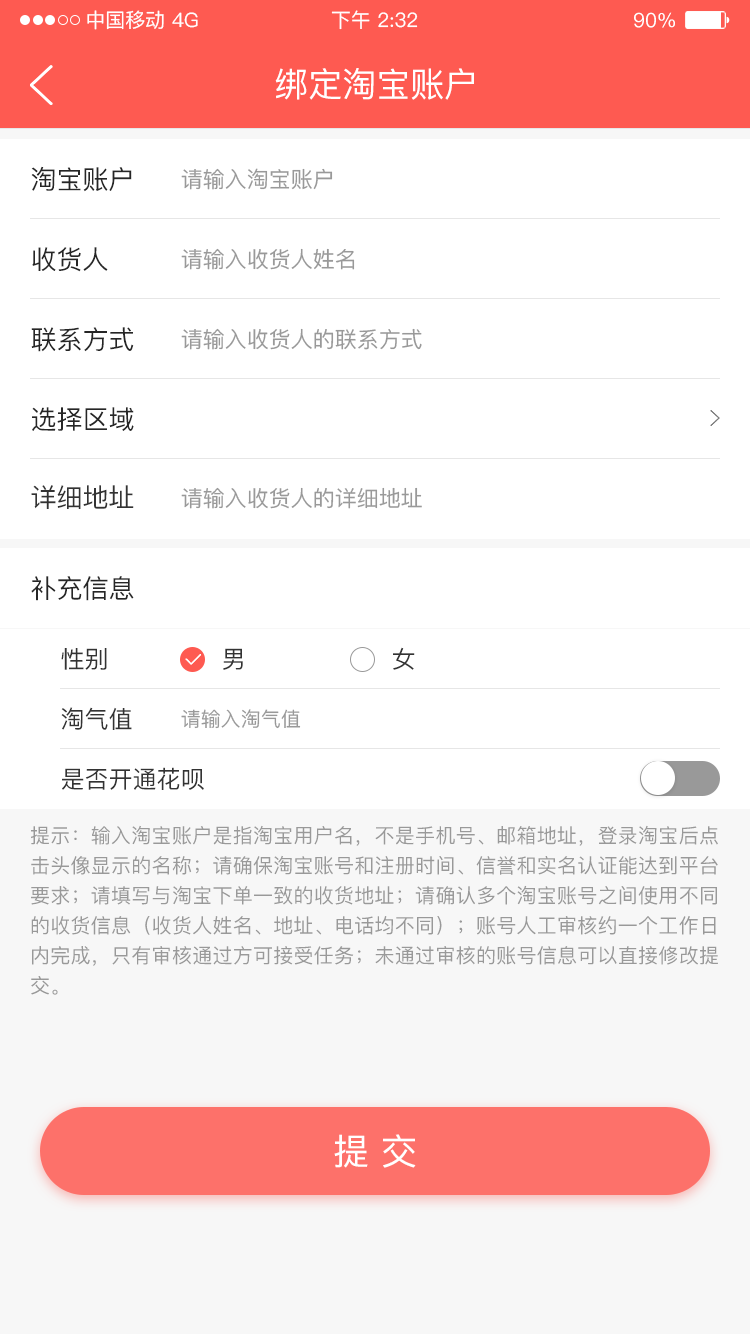
<style>
.page{position:relative;width:750px;height:1334px;background:#ffffff}
.page>*{position:absolute;margin:0}
.t1{font:20px "PingFang-SC-Medium";color:#ffffff}
.t2{font:34px "PingFang-SC-Medium";color:#ffffff}
.t3{font:26px "PingFang-SC-Medium";color:#262626}
.t4{font:22px "PingFang-SC-Medium";color:#999999}
.t5{font:26px "PingFang-SC-Medium";color:#333333}
.t6{font:24px "PingFang-SC-Medium";color:#333333}
.t7{font:20px "PingFang-SC-Medium";color:#999999}
.t8{font:20px/30px "PingFang-SC-Medium";color:#999999}
.t9{font:36px "PingFang-SC-Medium";color:#ffffff}
</style>
<div class="page">
<p class="t1" style="left:87px;top:10px;width:77px;height:20px">中国移动</p>
<p class="t1" style="left:172px;top:12px;width:26px;height:16px">4G</p>
<p class="t1" style="left:331px;top:10px;width:87px;height:20px">下午 2:32</p>
<p class="t1" style="left:634px;top:12px;width:41px;height:16px">90%</p>
<p class="t2" style="left:275px;top:68px;width:199px;height:32px">绑定淘宝账户</p>
<p class="t3" style="left:31px;top:166px;width:101px;height:26px">淘宝账户</p>
<p class="t4" style="left:181px;top:168px;width:152px;height:22px">请输入淘宝账户</p>
<p class="t3" style="left:32px;top:247px;width:76px;height:25px">收货人</p>
<p class="t4" style="left:181px;top:248px;width:174px;height:22px">请输入收货人姓名</p>
<p class="t3" style="left:31px;top:327px;width:103px;height:25px">联系方式</p>
<p class="t4" style="left:181px;top:328px;width:241px;height:22px">请输入收货人的联系方式</p>
<p class="t3" style="left:32px;top:407px;width:102px;height:24px">选择区域</p>
<p class="t5" style="left:31px;top:485px;width:103px;height:24px">详细地址</p>
<p class="t4" style="left:181px;top:487px;width:241px;height:22px">请输入收货人的详细地址</p>
<p class="t3" style="left:31px;top:576px;width:103px;height:25px">补充信息</p>
<p class="t6" style="left:61px;top:648px;width:46px;height:22px">性别</p>
<p class="t6" style="left:223px;top:648px;width:20px;height:22px">男</p>
<p class="t6" style="left:393px;top:647px;width:22px;height:23px">女</p>
<p class="t6" style="left:61px;top:707px;width:71px;height:23px">淘气值</p>
<p class="t7" style="left:181px;top:709px;width:120px;height:20px">请输入淘气值</p>
<p class="t6" style="left:62px;top:767px;width:142px;height:23px">是否开通花呗</p>
<p class="t8" style="left:31px;top:825px;width:687px;height:170px;text-align:justify">提示：输入淘宝账户是指淘宝用户名，不是手机号、邮箱地址，登录淘宝后点击头像显示的名称；请确保淘宝账号和注册时间、信誉和实名认证能达到平台要求；请填写与淘宝下单一致的收货地址；请确认多个淘宝账号之间使用不同的收货信息（收货人姓名、地址、电话均不同）；账号人工审核约一个工作日内完成，只有审核通过方可接受任务；未通过审核的账号信息可以直接修改提交。</p>
<p class="t9" style="left:334px;top:1134px;width:82px;height:34px">提 交</p>
</div>
